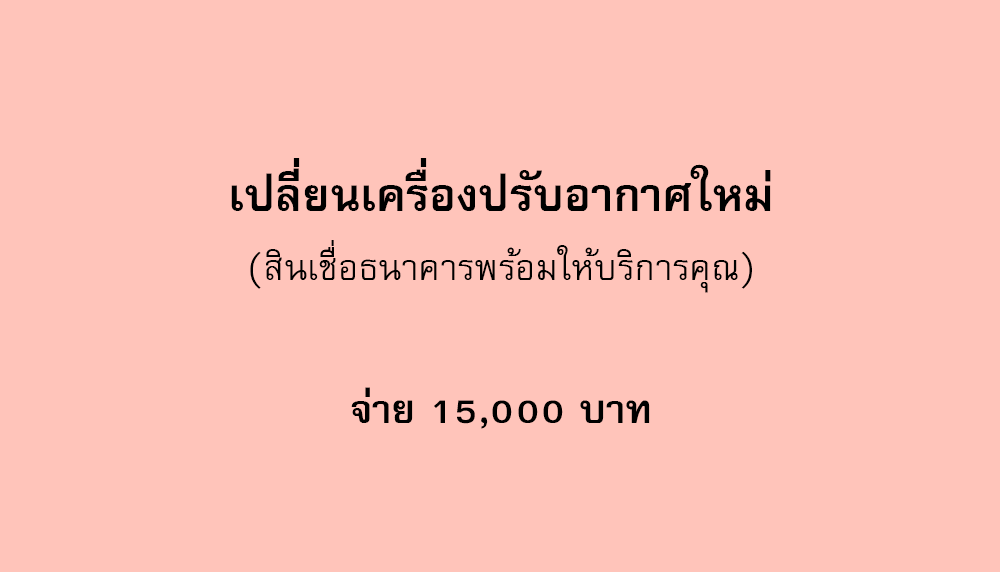
<style>
.page{position:relative;width:1000px;height:572px;background:#ffc4ba}
.page>*{position:absolute;margin:0}
.t1{font:64px "FreesiaUPCBold";color:#000000}
.t2{font:50px "FreesiaUPC";color:#000000}
.t3{font:56px "FreesiaUPCBold";color:#000000}
</style>
<div class="page">
<p class="t1" style="left:231px;top:158px;width:540px;height:53px">เปลี่ยนเครื่องปรับอากาศใหม่</p>
<p class="t2" style="left:250px;top:240px;width:502px;height:53px">(สินเชื่อธนาคารพร้อมให้บริการคุณ)</p>
<p class="t3" style="left:351px;top:387px;width:299px;height:42px">จ่าย 15,000 บาท</p>
</div>
